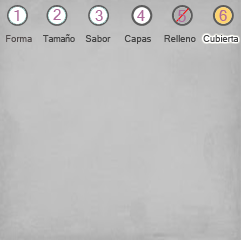
<style>
.page{position:relative;width:241px;height:240px}
.page>*{position:absolute;margin:0}
.t1{font:14.7px "MicrosoftSansSerif";color:#ae6b9b}
.t2{font:16px "MicrosoftSansSerif";color:#ae6b9b}
.t3{font:9.3px "MicrosoftSansSerif";color:#544e4e}
.t4{font:8.7px "MicrosoftSansSerif";color:#454545}
.t5{font:9.3px "MicrosoftSansSerif";color:#454545}
</style>
<div class="page">
<p class="t1" style="left:14px;top:10px;width:5px;height:11px">1</p>
<p class="t1" style="left:53px;top:9px;width:8px;height:11px">2</p>
<p class="t1" style="left:95px;top:10px;width:8px;height:11px">3</p>
<p class="t1" style="left:137px;top:10px;width:8px;height:11px">4</p>
<p class="t2" style="left:178px;top:10px;width:8px;height:12px">5</p>
<p class="t1" style="left:219px;top:10px;width:8px;height:11px">6</p>
<p class="t3" style="left:6px;top:35px;width:26px;height:7px">Forma</p>
<p class="t4" style="left:43px;top:34px;width:32px;height:8px">Tamaño</p>
<p class="t5" style="left:85px;top:35px;width:26px;height:7px">Sabor</p>
<p class="t5" style="left:124px;top:35px;width:27px;height:9px">Capas</p>
<p class="t5" style="left:164px;top:35px;width:32px;height:7px">Relleno</p>
<p class="t5" style="left:203px;top:35px;width:35px;height:7px">Cubierta</p>
</div>
